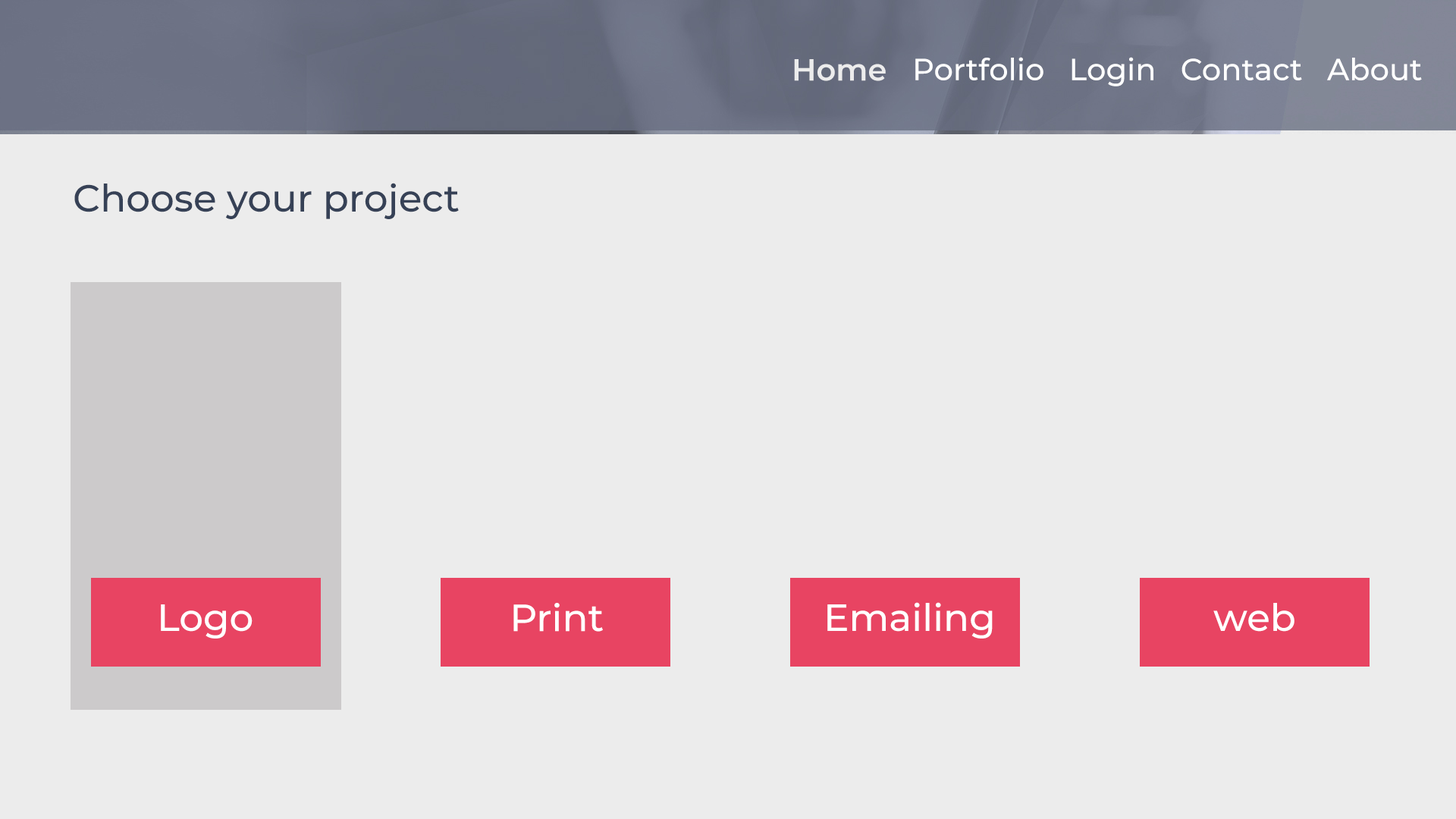
<style>
.page{position:relative;width:1456px;height:819px;background:#ececec}
.page>*{position:absolute;margin:0}
.t1{font:30.3px "Montserrat-SemiBold";color:#ececec}
.t2{font:37.9px "Montserrat-Medium";color:#364156}
.t3{font:37.9px "Montserrat-Medium";color:#ffffff}
</style>
<div class="page">
<p class="t1" style="left:794px;top:59px;width:92px;height:22px">Home</p>
<p class="t2" style="left:74px;top:183px;width:385px;height:36px">Choose your project</p>
<p class="t3" style="left:161px;top:604px;width:92px;height:35px">Logo</p>
<p class="t3" style="left:513px;top:603px;width:90px;height:29px">Print</p>
<p class="t3" style="left:827px;top:602px;width:166px;height:37px">Emailing</p>
<p class="t3" style="left:1213px;top:603px;width:81px;height:29px">web</p>
</div>
